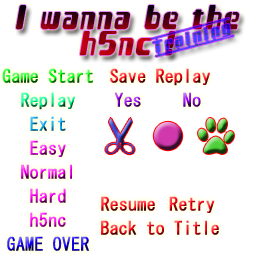
<style>
.page{position:relative;width:256px;height:256px;background:#ffffff}
.page>*{position:absolute;margin:0}
.t1{font:30px/13px "ConsoleBold";font-weight:bold;scale:0.97 1}
.t2{font:18px "MS-Gothic";font-weight:bold;scale:0.97 1}
</style>
<div class="page">
<p class="t1" style="left:16px;top:5px;width:224px;height:51px;text-align:center">I wanna be the<br><br>h5nc !</p>
<p class="t2" style="left:2px;top:68px;width:91px;height:15px">Game Start</p>
<p class="t2" style="left:110px;top:68px;width:100px;height:18px">Save Replay</p>
<p class="t2" style="left:21px;top:92px;width:54px;height:18px">Replay</p>
<p class="t2" style="left:114px;top:92px;width:27px;height:15px">Yes</p>
<p class="t2" style="left:183px;top:92px;width:18px;height:15px">No</p>
<p class="t2" style="left:30px;top:116px;width:36px;height:15px">Exit</p>
<p class="t2" style="left:30px;top:140px;width:36px;height:17px">Easy</p>
<p class="t2" style="left:21px;top:164px;width:51px;height:15px">Normal</p>
<p class="t2" style="left:30px;top:188px;width:36px;height:15px">Hard</p>
<p class="t2" style="left:101px;top:196px;width:54px;height:15px">Resume</p>
<p class="t2" style="left:169px;top:196px;width:46px;height:17px">Retry</p>
<p class="t2" style="left:30px;top:212px;width:36px;height:15px">h5nc</p>
<p class="t2" style="left:101px;top:220px;width:118px;height:15px">Back to Title</p>
<p class="t2" style="left:7px;top:236px;width:82px;height:15px">GAME OVER</p>
</div>
